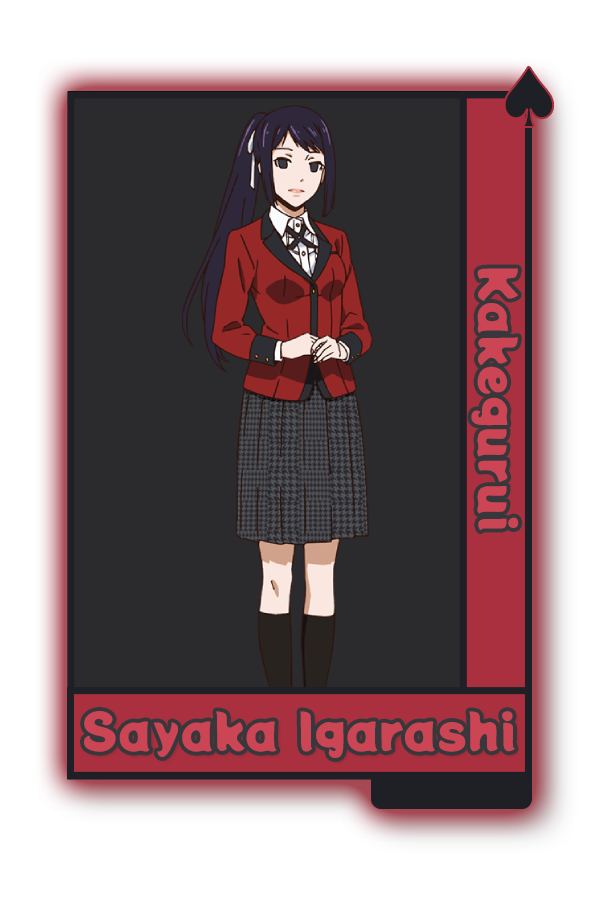
<style>
.page{position:relative;width:600px;height:900px;background:#2b2a2d}
.page>*{position:absolute;margin:0}
.t1{font:80px "DejaVuSans";color:#1e2026}
.t2{font:50px "PottaOne-Regular";color:#cb4554}
</style>
<div class="page">
<p class="t1" style="left:505px;top:67px;width:47px;height:59px">♠️</p>
<p class="t2" style="left:471px;top:268px;width:48px;height:263px;rotate:90deg">Kakegurui</p>
<p class="t2" style="left:83px;top:710px;width:432px;height:49px">Sayaka Igarashi</p>
</div>
